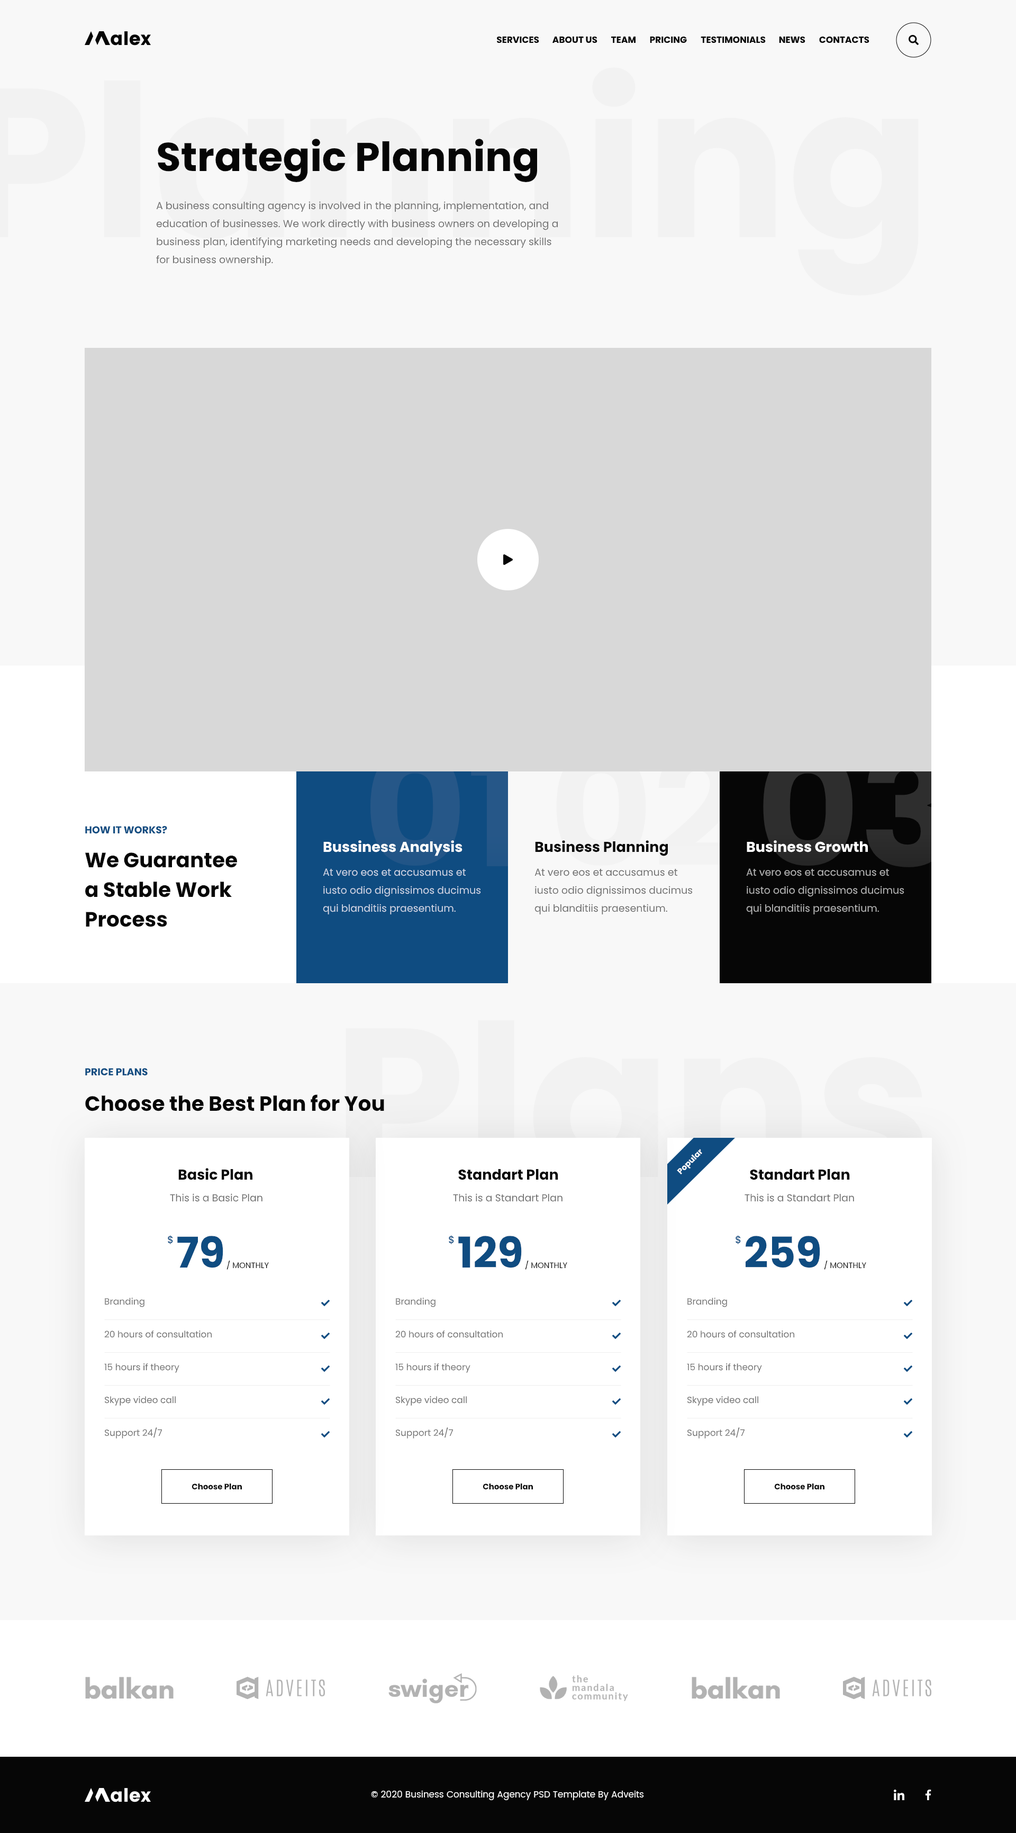
<style>
.page{position:relative;width:1016px;height:1833px;background:#f8f8f8}
.page>*{position:absolute;margin:0}
.t1{font:9px "Poppins-Bold";color:#060606}
.t2{font:40.2px "Poppins-Bold";color:#060606}
.t3{font:10.1px/18px "Poppins-Regular";color:#6c6c6c}
.t4{font:10.1px "Poppins-Bold";color:#0f4c81}
.t5{font:14.3px "Poppins-Bold";color:#ffffff}
.t6{font:14.3px "Poppins-Bold";color:#060606}
.t7{font:20.6px/29.6px "Poppins-Bold";color:#060606}
.t8{font:10.1px/18px "Poppins-Regular";color:#cfd7e7}
.t9{font:10.1px/18px "Poppins-Regular";color:#b4b4b4}
.t10{font:20.6px "Poppins-Bold";color:#060606}
.t11{font:7.9px "Poppins-Bold";color:#ffffff}
.t12{font:10.1px "Poppins-Regular";color:#6c6c6c}
.t13{font:10.1px "Poppins-Medium";color:#0f4c81}
.t14{font:42.4px "Poppins-Bold";color:#0f4c81}
.t15{font:7.9px "Poppins-Regular";color:#060606}
.t16{font:9px "Poppins-Regular";color:#6c6c6c}
.t17{font:7.9px "Poppins-Bold";color:#060606}
.t18{font:9px "Poppins-Regular";color:#ffffff}
</style>
<div class="page">
<p class="t1" style="left:497px;top:36px;width:42px;height:7px">SERVICES</p>
<p class="t1" style="left:553px;top:37px;width:45px;height:6px">ABOUT US</p>
<p class="t1" style="left:611px;top:37px;width:25px;height:6px">TEAM</p>
<p class="t1" style="left:650px;top:37px;width:37px;height:6px">PRICING</p>
<p class="t1" style="left:701px;top:37px;width:65px;height:6px">TESTIMONIALS</p>
<p class="t1" style="left:779px;top:37px;width:27px;height:6px">NEWS</p>
<p class="t1" style="left:820px;top:37px;width:50px;height:6px">CONTACTS</p>
<p class="t2" style="left:158px;top:139px;width:379px;height:43px">Strategic Planning</p>
<p class="t3" style="left:156px;top:201px;width:402px;height:65px">A business consulting agency is involved in the planning, implementation, and education of businesses. We work directly with business owners on developing a business plan, identifying marketing needs and developing the necessary skills for business ownership.</p>
<p class="t4" style="left:85px;top:825px;width:82px;height:9px">HOW IT WORKS?</p>
<p class="t5" style="left:323px;top:840px;width:140px;height:16px">Bussiness Analysis</p>
<p class="t6" style="left:535px;top:840px;width:133px;height:16px">Business Planning</p>
<p class="t5" style="left:747px;top:840px;width:121px;height:12px">Business Growth</p>
<p class="t7" style="left:85px;top:852px;width:153px;height:75px">We Guarantee a Stable Work Process</p>
<p class="t8" style="left:323px;top:868px;width:158px;height:46px">At vero eos et accusamus et iusto odio dignissimos ducimus qui blanditiis praesentium.</p>
<p class="t3" style="left:535px;top:868px;width:158px;height:46px">At vero eos et accusamus et iusto odio dignissimos ducimus qui blanditiis praesentium.</p>
<p class="t9" style="left:746px;top:868px;width:159px;height:46px">At vero eos et accusamus et iusto odio dignissimos ducimus qui blanditiis praesentium.</p>
<p class="t4" style="left:85px;top:1068px;width:63px;height:8px">PRICE PLANS</p>
<p class="t10" style="left:85px;top:1094px;width:299px;height:17px">Choose the Best Plan for You</p>
<p class="t11" style="left:677px;top:1149px;width:26px;height:25px;rotate:-45deg">Popular</p>
<p class="t6" style="left:178px;top:1168px;width:75px;height:12px">Basic Plan</p>
<p class="t6" style="left:458px;top:1169px;width:101px;height:11px">Standart Plan</p>
<p class="t6" style="left:750px;top:1169px;width:100px;height:11px">Standart Plan</p>
<p class="t12" style="left:170px;top:1193px;width:93px;height:9px">This is a Basic Plan</p>
<p class="t12" style="left:453px;top:1193px;width:110px;height:9px">This is a Standart Plan</p>
<p class="t12" style="left:745px;top:1193px;width:109px;height:9px">This is a Standart Plan</p>
<p class="t13" style="left:168px;top:1235px;width:5px;height:9px">$</p>
<p class="t14" style="left:177px;top:1236px;width:46px;height:32px">79</p>
<p class="t13" style="left:449px;top:1235px;width:5px;height:9px">$</p>
<p class="t14" style="left:458px;top:1236px;width:64px;height:32px">129</p>
<p class="t13" style="left:736px;top:1235px;width:5px;height:9px">$</p>
<p class="t14" style="left:746px;top:1236px;width:75px;height:32px">259</p>
<p class="t15" style="left:227px;top:1260px;width:42px;height:10px">/ MONTHLY</p>
<p class="t15" style="left:525px;top:1260px;width:43px;height:10px">/ MONTHLY</p>
<p class="t15" style="left:824px;top:1260px;width:43px;height:10px">/ MONTHLY</p>
<p class="t16" style="left:105px;top:1298px;width:40px;height:9px">Branding</p>
<p class="t16" style="left:396px;top:1298px;width:40px;height:9px">Branding</p>
<p class="t16" style="left:688px;top:1298px;width:39px;height:9px">Branding</p>
<p class="t16" style="left:104px;top:1330px;width:108px;height:8px">20 hours of consultation</p>
<p class="t16" style="left:395px;top:1330px;width:108px;height:8px">20 hours of consultation</p>
<p class="t16" style="left:687px;top:1330px;width:108px;height:8px">20 hours of consultation</p>
<p class="t16" style="left:104px;top:1363px;width:75px;height:10px">15 hours if theory</p>
<p class="t16" style="left:395px;top:1363px;width:76px;height:10px">15 hours if theory</p>
<p class="t16" style="left:687px;top:1363px;width:75px;height:10px">15 hours if theory</p>
<p class="t16" style="left:104px;top:1396px;width:72px;height:10px">Skype video call</p>
<p class="t16" style="left:395px;top:1396px;width:72px;height:10px">Skype video call</p>
<p class="t16" style="left:688px;top:1396px;width:71px;height:10px">Skype video call</p>
<p class="t16" style="left:104px;top:1427px;width:58px;height:11px">Support 24/7</p>
<p class="t16" style="left:395px;top:1427px;width:58px;height:11px">Support 24/7</p>
<p class="t16" style="left:688px;top:1427px;width:57px;height:11px">Support 24/7</p>
<p class="t17" style="left:192px;top:1483px;width:50px;height:7px">Choose Plan</p>
<p class="t17" style="left:483px;top:1483px;width:50px;height:7px">Choose Plan</p>
<p class="t17" style="left:775px;top:1483px;width:50px;height:6px">Choose Plan</p>
<p class="t18" style="left:371px;top:1790px;width:273px;height:10px">© 2020 Business Consulting Agency PSD Template By Adveits</p>
</div>
